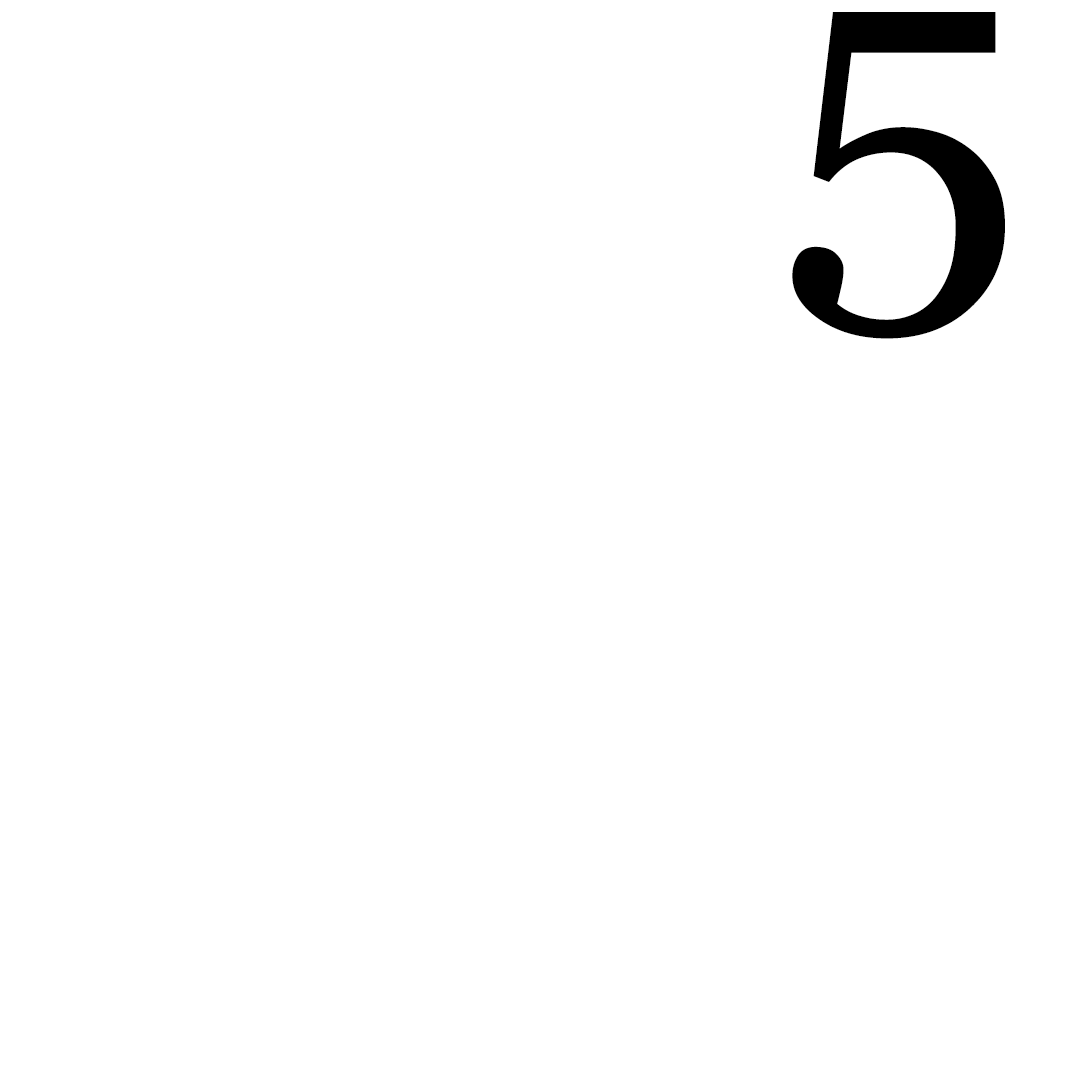
<style>
.page{position:relative;width:1080px;height:1080px;background:#ffffff}
.page>*{position:absolute;margin:0}
.t1{font:464.5px "Georgia";color:#000000}
</style>
<div class="page">
<p class="t1" style="left:792px;top:12px;width:213px;height:327px">5</p>
</div>
